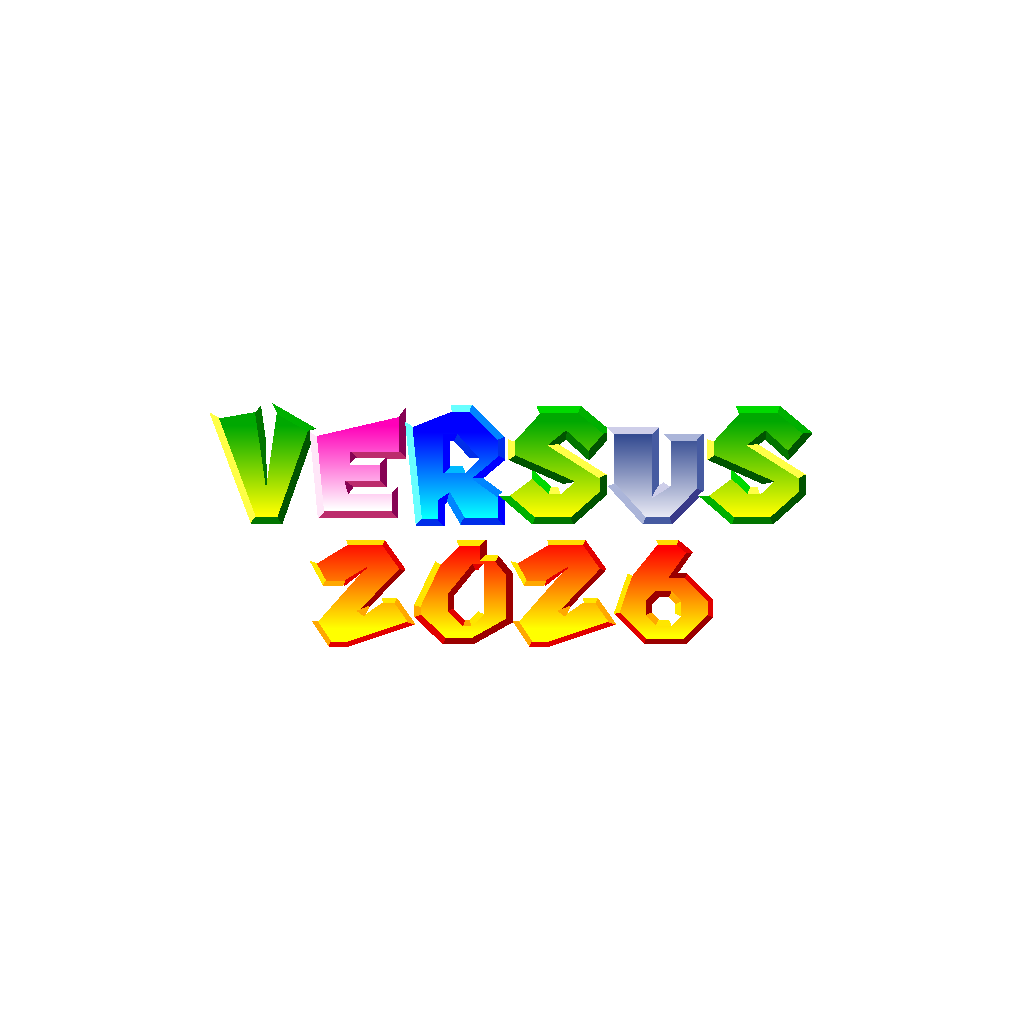
<style>
.page{position:relative;width:1024px;height:1024px;background:#ffffff}
.page>*{position:absolute;margin:0}
.t1{font:170px "SuperMario64FontRegular"}
.t2{font:150px "SuperMario64FontRegular"}
</style>
<div class="page">
<p class="t1" style="left:210px;top:403px;width:602px;height:123px">VERSUS</p>
<p class="t2" style="left:310px;top:540px;width:403px;height:107px">2026</p>
</div>
